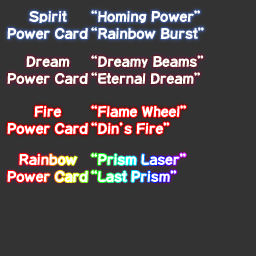
<style>
.page{position:relative;width:256px;height:256px;background:#333333}
.page>*{position:absolute;margin:0}
.t1{font:14px/17px "DFPOP1-W12-WINP-RKSJ-H";color:#ffffff}
.t2{font:14px/17px "DFPOP1-W12-WINP-RKSJ-H";letter-spacing:-0.66em;color:#ffffff}
</style>
<div class="page">
<p class="t1" style="left:7px;top:11px;width:81px;height:28px;text-align:center">Spirit<br>Power Card</p>
<p class="t1" style="left:91px;top:10px;width:113px;height:29px">“Homing Power”<br>“Rainbow Burst”</p>
<p class="t1" style="left:7px;top:56px;width:81px;height:28px;text-align:center">Dream<br>Power Card</p>
<p class="t1" style="left:91px;top:55px;width:113px;height:29px">“Dreamy Beams”<br>“Eternal Dream”</p>
<p class="t1" style="left:7px;top:106px;width:81px;height:28px;text-align:center">Fire<br>Power Card</p>
<p class="t1" style="left:91px;top:105px;width:95px;height:29px">“Flame Wheel”<br>“Din<span class="t2">’</span>s Fire”</p>
<p class="t1" style="left:7px;top:154px;width:81px;height:28px;text-align:center">Rainbow<br>Power Card</p>
<p class="t1" style="left:91px;top:153px;width:95px;height:29px">“Prism Laser”<br>“Last Prism”</p>
</div>
